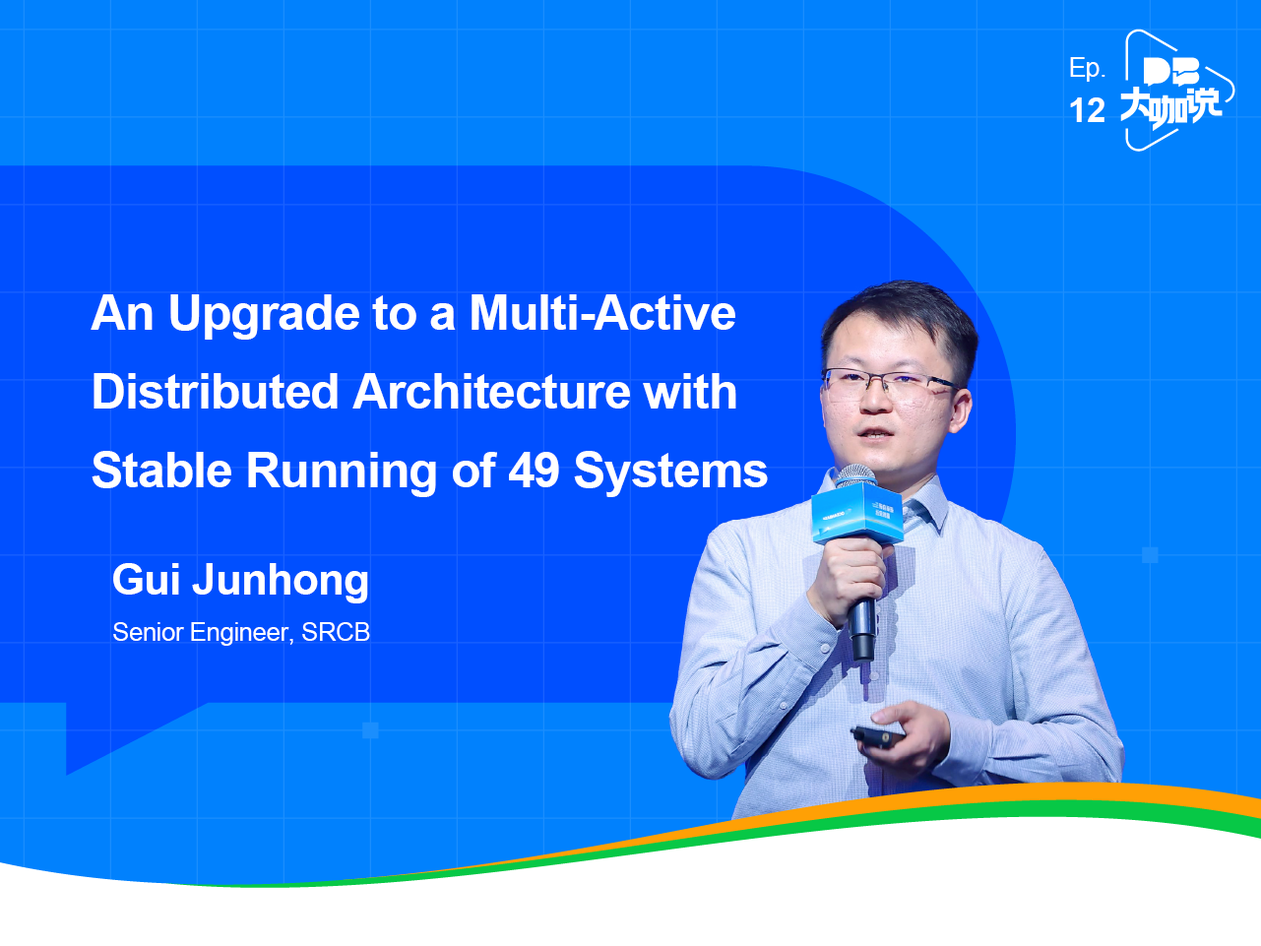
<style>
.page{position:relative;width:1261px;height:946px;background:#0181fd}
.page>*{position:absolute;margin:0}
.t1{font:26.6px/39.4px "ArialMT";letter-spacing:-0.02em;color:#ffffff}
.t2{font:34.4px/39.4px "Arial-BoldMT";letter-spacing:-0.02em;color:#ffffff}
.t3{font:49.2px/78.7px "Arial-BoldMT";letter-spacing:-0.02em;color:#ffffff}
.t4{font:43.3px "Arial-BoldMT";letter-spacing:-0.02em;color:#ffffff}
.t5{font:25.6px "ArialMT";letter-spacing:-0.02em;color:#ffffff}
</style>
<div class="page">
<p class="t1" style="left:1070px;top:57px;width:35px;height:65px">Ep. <span class="t2">12</span></p>
<p class="t3" style="left:91px;top:294px;width:677px;height:203px">An Upgrade to a Multi-Active Distributed Architecture with<br>Stable Running of 49 Systems</p>
<p class="t4" style="left:113px;top:563px;width:255px;height:40px">Gui Junhong</p>
<p class="t5" style="left:113px;top:622px;width:257px;height:24px">Senior Engineer, SRCB</p>
</div>
